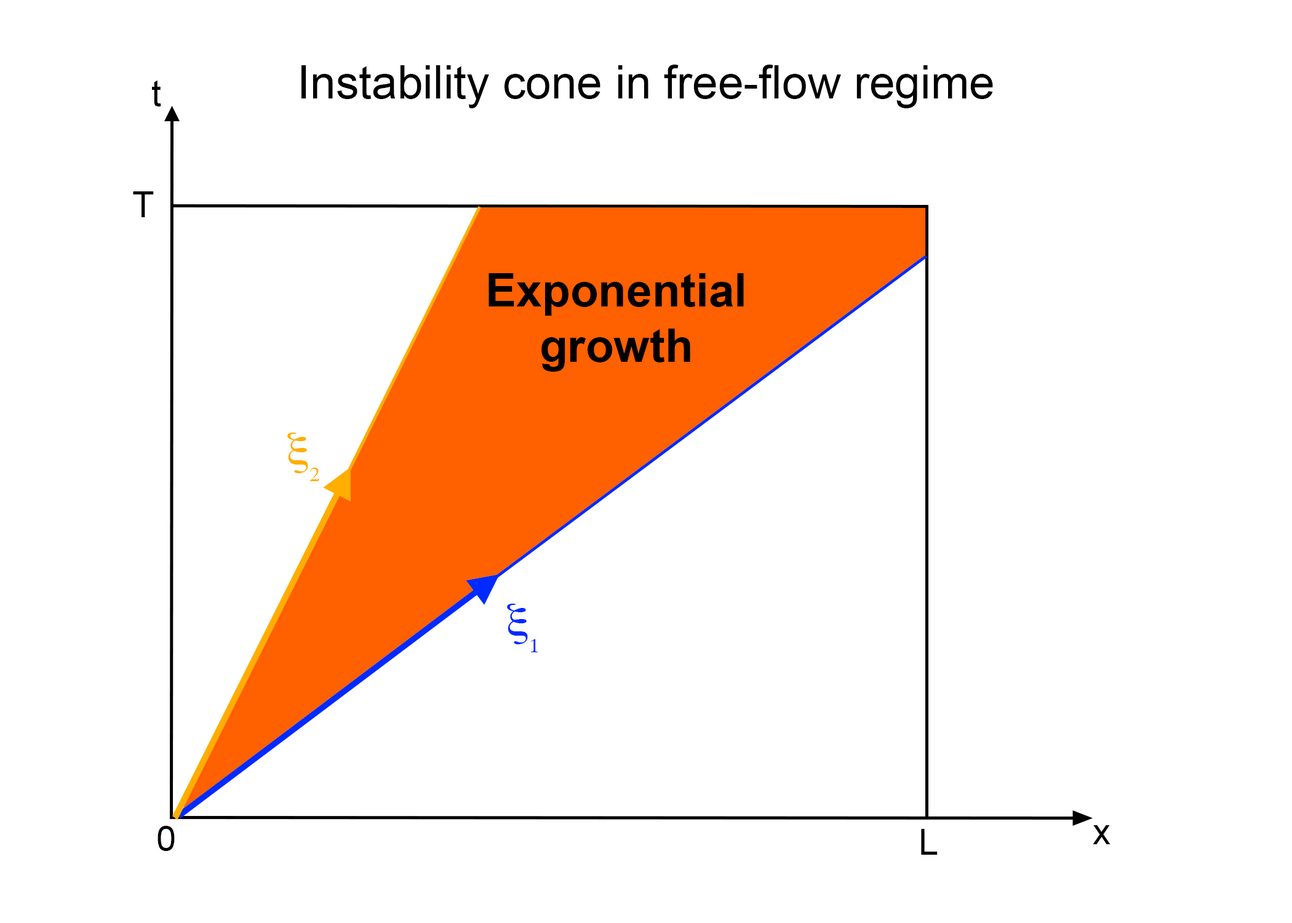
<style>
.page{position:relative;width:1292px;height:923px;background:#ffffff}
.page>*{position:absolute;margin:0}
.t1{font:46.1px "ArialMT";color:#000000}
.t2{font:46.1px "Arial-BoldMT";color:#000000}
</style>
<div class="page">
<p class="t1" style="left:301px;top:65px;width:692px;height:43px">Instability cone in free-flow regime</p>
<p class="t2" style="left:489px;top:273px;width:255px;height:99px;text-align:center">Exponential growth</p>
</div>
